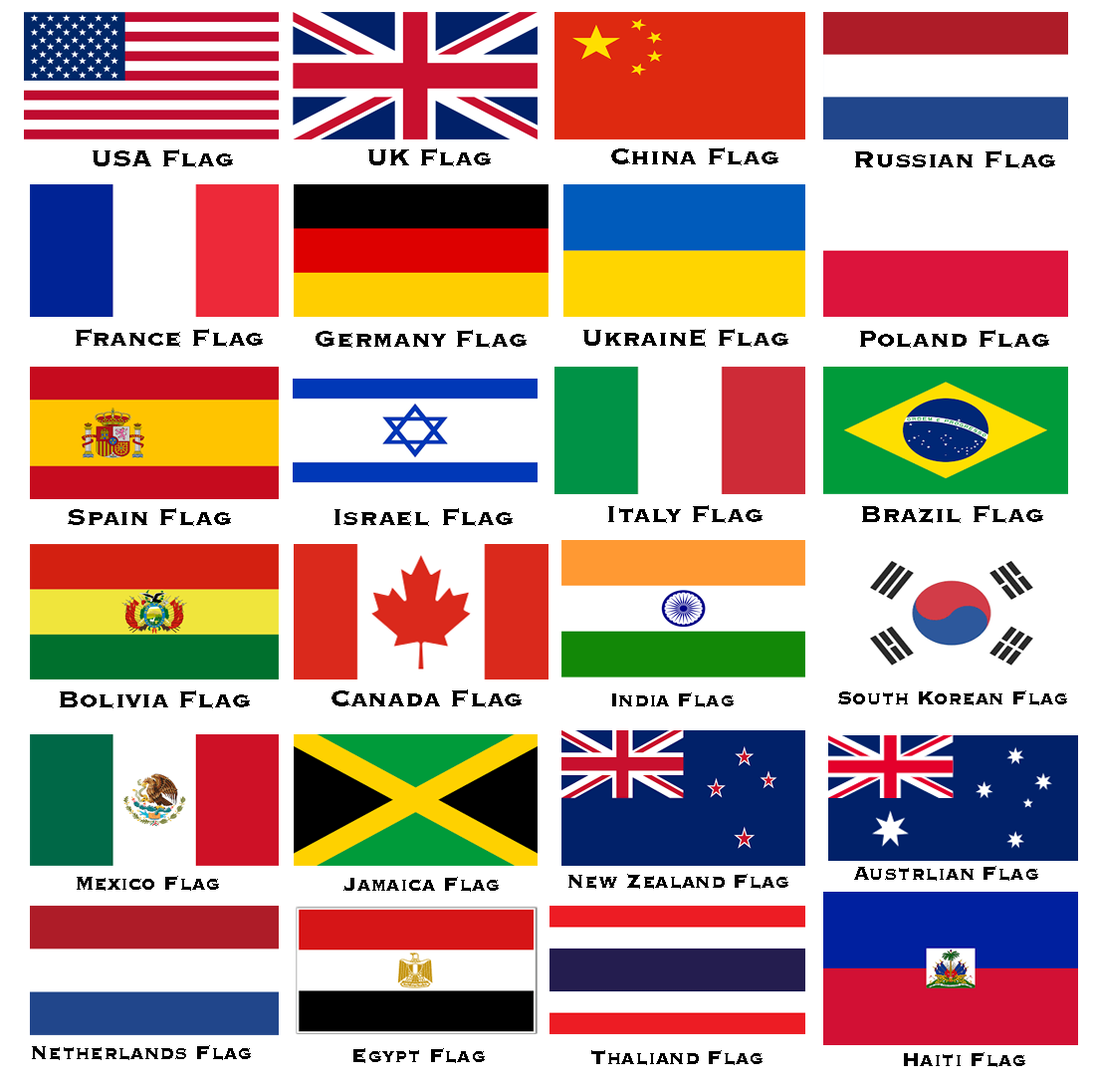
<style>
.page{position:relative;width:1096px;height:1088px;background:#ffffff}
.page>*{position:absolute;margin:0}
.t1{font:29.9px "CopperplateGothicBT-Heavy";color:#000000}
.t2{font:23.9px "CopperplateGothicBT-Heavy";color:#000000}
</style>
<div class="page">
<p class="t1" style="left:93px;top:149px;width:140px;height:18px">USA Flag</p>
<p class="t1" style="left:368px;top:148px;width:123px;height:18px">UK Flag</p>
<p class="t1" style="left:611px;top:147px;width:168px;height:18px">China Flag</p>
<p class="t1" style="left:855px;top:150px;width:201px;height:18px">Russian Flag</p>
<p class="t1" style="left:76px;top:329px;width:187px;height:18px">France Flag</p>
<p class="t1" style="left:316px;top:330px;width:211px;height:18px">Germany Flag</p>
<p class="t1" style="left:584px;top:329px;width:205px;height:18px">UkrainE Flag</p>
<p class="t1" style="left:860px;top:330px;width:190px;height:18px">Poland Flag</p>
<p class="t1" style="left:68px;top:508px;width:163px;height:18px">Spain Flag</p>
<p class="t1" style="left:335px;top:508px;width:178px;height:18px">Israel Flag</p>
<p class="t1" style="left:608px;top:505px;width:155px;height:18px">Italy Flag</p>
<p class="t1" style="left:862px;top:505px;width:182px;height:18px">Brazil Flag</p>
<p class="t1" style="left:332px;top:689px;width:190px;height:18px">Canada Flag</p>
<p class="t1" style="left:60px;top:690px;width:190px;height:18px">Bolivia Flag</p>
<p class="t2" style="left:612px;top:692px;width:122px;height:15px">India Flag</p>
<p class="t2" style="left:839px;top:690px;width:229px;height:15px">South Korean Flag</p>
<p class="t2" style="left:854px;top:865px;width:185px;height:15px">Austrlian Flag</p>
<p class="t2" style="left:77px;top:875px;width:142px;height:15px">Mexico Flag</p>
<p class="t2" style="left:344px;top:876px;width:155px;height:15px">Jamaica Flag</p>
<p class="t2" style="left:569px;top:873px;width:220px;height:15px">New Zealand Flag</p>
<p class="t2" style="left:32px;top:1045px;width:219px;height:15px">Netherlands Flag</p>
<p class="t2" style="left:354px;top:1048px;width:131px;height:15px">Egypt Flag</p>
<p class="t2" style="left:592px;top:1050px;width:171px;height:15px">Thaliand Flag</p>
<p class="t2" style="left:904px;top:1052px;width:122px;height:15px">Haiti Flag</p>
</div>
